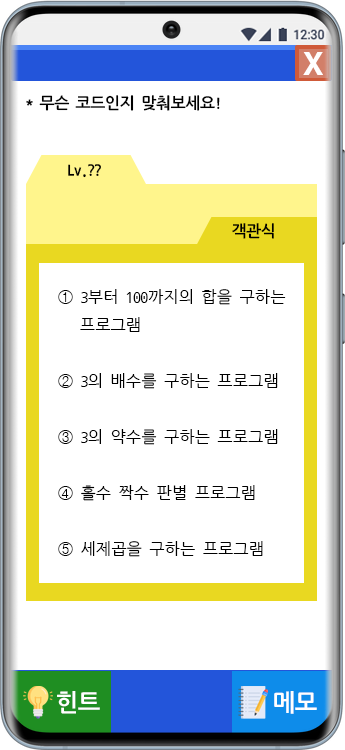
<style>
.page{position:relative;width:345px;height:750px;background:#ffffff}
.page>*{position:absolute;margin:0}
.t1{font:30px "H2gtrE";color:#ffffff}
.t2{font:16px "NanumGothicCoding-Bold";letter-spacing:-0.08em;color:#000000}
.t3{font:16px "NanumGothicCoding";letter-spacing:-0.04em;color:#000000}
.t4{font:24px "NanumGothicCoding-Bold";letter-spacing:-0.08em;color:#ffffff}
</style>
<div class="page">
<p class="t1" style="left:303px;top:52px;width:20px;height:23px">X</p>
<p class="t2" style="left:26px;top:95px;width:194px;height:16px">* 무슨 코드인지 맞춰보세요!</p>
<p class="t2" style="left:68px;top:164px;width:33px;height:14px">Lv.??</p>
<p class="t2" style="left:232px;top:223px;width:42px;height:16px">객관식</p>
<p class="t3" style="left:58px;top:289px;width:228px;height:268px">① 3부터 100까지의 합을 구하는<br>   프로그램<br><br>② 3의 배수를 구하는 프로그램<br><br>③ 3의 약수를 구하는 프로그램<br><br>④ 홀수 짝수 판별 프로그램 <br><br>⑤ 세제곱을 구하는 프로그램</p>
<p class="t4" style="left:57px;top:691px;width:43px;height:23px">힌트</p>
<p class="t4" style="left:274px;top:691px;width:43px;height:23px">메모</p>
</div>
